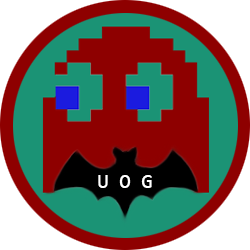
<style>
.page{position:relative;width:250px;height:250px;background:#8e0000}
.page>*{position:absolute;margin:0}
.t1{font:20px "Consolas";color:#ffffff}
</style>
<div class="page">
<p class="t1" style="left:98px;top:175px;width:54px;height:13px">U O G</p>
</div>
